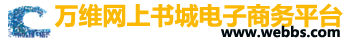
<style>
.page{position:relative;width:360px;height:40px;background:#ffffff}
.page>*{position:absolute;margin:0}
.t1{font:24px "MicrosoftYaHei-Bold";color:#fbb906}
.t2{font:14px "MicrosoftYaHei-Bold";color:#010b10}
</style>
<div class="page">
<p class="t1" style="left:54px;top:3px;width:289px;height:25px">万维网上书城电子商务平台</p>
<p class="t2" style="left:221px;top:25px;width:119px;height:13px">www.webbs.com</p>
</div>
